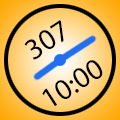
<style>
.page{position:relative;width:120px;height:120px}
.page>*{position:absolute;margin:0}
.t1{font:30px "MyriadPro-Regular";color:#000000}
</style>
<div class="page">
<p class="t1" style="left:24px;top:20px;width:40px;height:40px;rotate:-33deg">307</p>
<p class="t1" style="left:42px;top:60px;width:61px;height:47px;rotate:-33deg">10:00</p>
</div>
